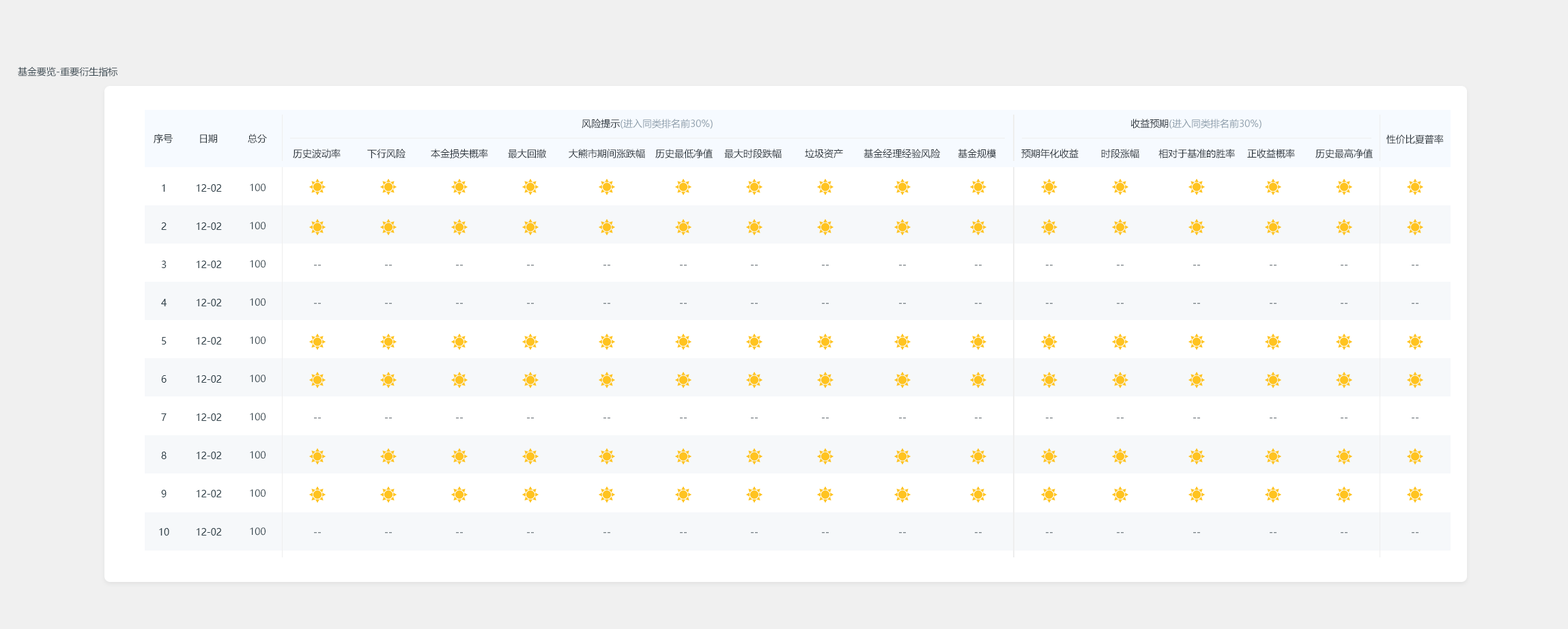
<style>
.page{position:relative;width:1568px;height:629px;background:#ffffff}
.page>*{position:absolute;margin:0}
.t1{font:9.6px "MicrosoftYaHei";color:#34444d}
.t2{font:9.6px "MicrosoftYaHei";color:#8e9eab}
.t3{font:9.6px "MicrosoftYaHei";color:#273037}
.t4{font:9.6px/38.2px "MicrosoftYaHei";color:#34444d}
.t5{font:9.6px/38.2px "MicrosoftYaHei"}
</style>
<div class="page">
<p class="t1" style="left:18px;top:67px;width:100px;height:9px">基金要览-重要衍生指标</p>
<p class="t2" style="left:582px;top:119px;width:131px;height:10px"><span class="t3">风险提示</span>(进入同类排名前30%)</p>
<p class="t2" style="left:1130px;top:119px;width:131px;height:10px"><span class="t3">收益预期</span>(进入同类排名前30%)</p>
<p class="t3" style="left:154px;top:134px;width:19px;height:9px">序号</p>
<p class="t3" style="left:200px;top:134px;width:17px;height:9px">日期</p>
<p class="t3" style="left:248px;top:134px;width:19px;height:9px">总分</p>
<p class="t3" style="left:1386px;top:134px;width:58px;height:10px">性价比夏普率</p>
<p class="t3" style="left:293px;top:149px;width:48px;height:9px">历史波动率</p>
<p class="t3" style="left:367px;top:149px;width:38px;height:9px">下行风险</p>
<p class="t3" style="left:431px;top:149px;width:57px;height:9px">本金损失概率</p>
<p class="t3" style="left:508px;top:149px;width:38px;height:9px">最大回撤</p>
<p class="t3" style="left:569px;top:149px;width:76px;height:9px">大熊市期间涨跌幅</p>
<p class="t3" style="left:655px;top:149px;width:58px;height:9px">历史最低净值</p>
<p class="t3" style="left:724px;top:149px;width:58px;height:9px">最大时段跌幅</p>
<p class="t3" style="left:805px;top:149px;width:38px;height:9px">垃圾资产</p>
<p class="t3" style="left:864px;top:149px;width:77px;height:9px">基金经理经验风险</p>
<p class="t3" style="left:958px;top:149px;width:38px;height:9px">基金规模</p>
<p class="t3" style="left:1021px;top:149px;width:58px;height:9px">预期年化收益</p>
<p class="t3" style="left:1101px;top:149px;width:38px;height:9px">时段涨幅</p>
<p class="t3" style="left:1158px;top:149px;width:77px;height:9px">相对于基准的胜率</p>
<p class="t3" style="left:1247px;top:149px;width:48px;height:9px">正收益概率</p>
<p class="t3" style="left:1315px;top:149px;width:58px;height:9px">历史最高净值</p>
<p class="t4" style="left:159px;top:184px;width:10px;height:352px;text-align:center">1<br>2<br>3<br>4<br>5<br>6<br>7<br>8<br>9<br>10<br>11</p>
<p class="t4" style="left:197px;top:184px;width:25px;height:352px;text-align:center">12-02<br>12-02<br>12-02<br>12-02<br>12-02<br>12-02<br>12-02<br>12-02<br>12-02<br>12-02<br>12-02</p>
<p class="t4" style="left:250px;top:184px;width:16px;height:352px;text-align:center">100<br>100<br>100<br>100<br>100<br>100<br>100<br>100<br>100<br>100</p>
<p class="t5" style="left:314px;top:265px;width:7px;height:269px;text-align:center">--<br>--<br><br><br>--<br><br><br>--</p>
<p class="t5" style="left:385px;top:265px;width:7px;height:269px;text-align:center">--<br>--<br><br><br>--<br><br><br>--</p>
<p class="t5" style="left:456px;top:265px;width:7px;height:269px;text-align:center">--<br>--<br><br><br>--<br><br><br>--</p>
<p class="t5" style="left:527px;top:265px;width:7px;height:269px;text-align:center">--<br>--<br><br><br>--<br><br><br>--</p>
<p class="t5" style="left:603px;top:265px;width:7px;height:269px;text-align:center">--<br>--<br><br><br>--<br><br><br>--</p>
<p class="t5" style="left:680px;top:265px;width:7px;height:269px;text-align:center">--<br>--<br><br><br>--<br><br><br>--</p>
<p class="t5" style="left:751px;top:265px;width:7px;height:269px;text-align:center">--<br>--<br><br><br>--<br><br><br>--</p>
<p class="t5" style="left:822px;top:265px;width:7px;height:269px;text-align:center">--<br>--<br><br><br>--<br><br><br>--</p>
<p class="t5" style="left:899px;top:265px;width:7px;height:269px;text-align:center">--<br>--<br><br><br>--<br><br><br>--</p>
<p class="t5" style="left:975px;top:265px;width:7px;height:269px;text-align:center">--<br>--<br><br><br>--<br><br><br>--</p>
<p class="t5" style="left:1046px;top:265px;width:7px;height:269px;text-align:center">--<br>--<br><br><br>--<br><br><br>--</p>
<p class="t5" style="left:1117px;top:265px;width:7px;height:269px;text-align:center">--<br>--<br><br><br>--<br><br><br>--</p>
<p class="t5" style="left:1193px;top:265px;width:7px;height:269px;text-align:center">--<br>--<br><br><br>--<br><br><br>--</p>
<p class="t5" style="left:1270px;top:265px;width:7px;height:269px;text-align:center">--<br>--<br><br><br>--<br><br><br>--</p>
<p class="t5" style="left:1341px;top:265px;width:7px;height:269px;text-align:center">--<br>--<br><br><br>--<br><br><br>--</p>
<p class="t5" style="left:1412px;top:265px;width:7px;height:269px;text-align:center">--<br>--<br><br><br>--<br><br><br>--</p>
</div>
